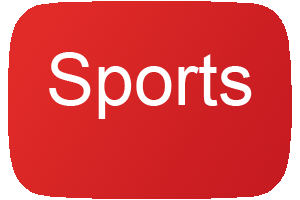
<style>
.page{position:relative;width:300px;height:200px}
.page>*{position:absolute;margin:0}
.t1{font:72px "ArialMT";color:#ffffff}
</style>
<div class="page">
<p class="t1" style="left:49px;top:52px;width:203px;height:67px">Sports</p>
</div>
